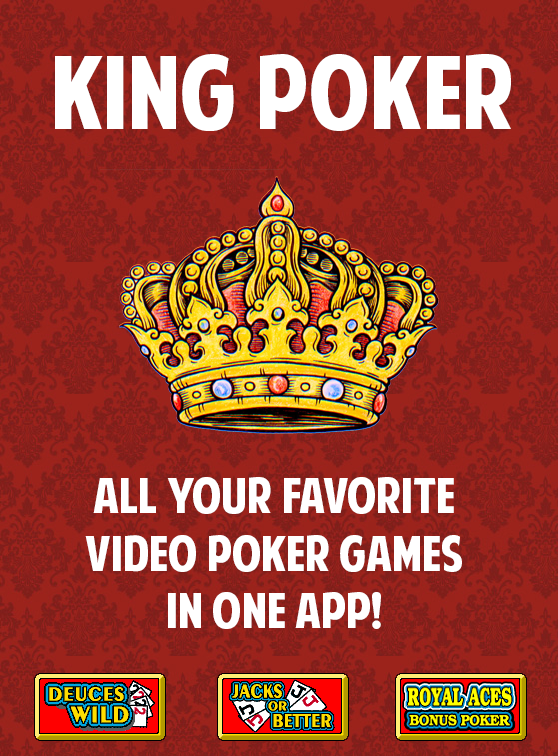
<style>
.page{position:relative;width:558px;height:756px}
.page>*{position:absolute;margin:0}
.t1{font:100px "AmericanPurpose";color:#ffffff}
.t2{font:48px "AmericanPurpose";color:#ffffff}
</style>
<div class="page">
<p class="t1" style="left:55px;top:54px;width:456px;height:77px">KING POKER</p>
<p class="t2" style="left:85px;top:477px;width:377px;height:152px;text-align:center">ALL YOUR FAVORITE<br>VIDEO POKER GAMES<br>IN ONE APP!</p>
</div>
